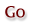
<style>
.page{position:relative;width:30px;height:25px;background:#ffffff}
.page>*{position:absolute;margin:0}
.t1{font:16px "LaudatioC";color:#6d0000}
</style>
<div class="page">
<p class="t1" style="left:5px;top:6px;width:20px;height:12px">Go</p>
</div>
